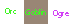
<style>
.page{position:relative;width:72px;height:24px;background:#ffffff}
.page>*{position:absolute;margin:0}
.t1{font:8px "MyriadPro-Regular";color:#41f623}
.t2{font:8px "MyriadPro-Regular";color:#d240f6}
</style>
<div class="page">
<p class="t1" style="left:5px;top:8px;width:11px;height:6px">Orc</p>
<p class="t1" style="left:25px;top:9px;width:21px;height:6px">Goblin</p>
<p class="t2" style="left:53px;top:10px;width:16px;height:8px">Ogre</p>
</div>
